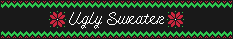
<style>
.page{position:relative;width:233px;height:39px;background:#191919}
.page>*{position:absolute;margin:0}
.t1{font:17px "Cursive";color:#ffffff}
</style>
<div class="page">
<p class="t1" style="left:69px;top:12px;width:95px;height:17px">Ugly Sweater</p>
</div>
